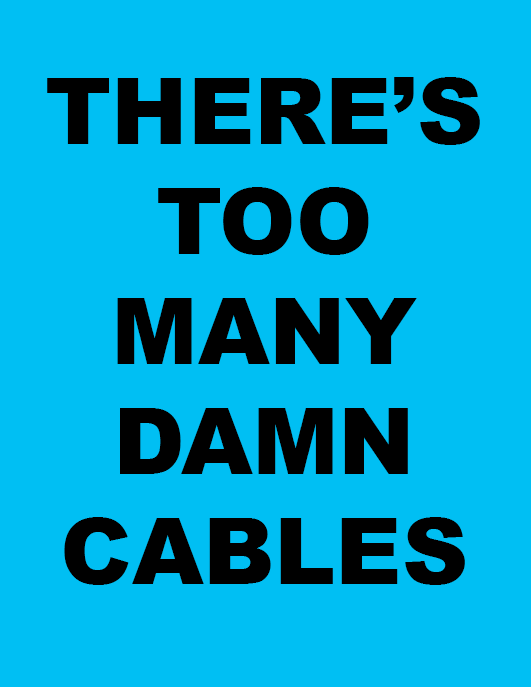
<style>
.page{position:relative;width:531px;height:687px;background:#00bff3}
.page>*{position:absolute;margin:0}
.t1{font:91.7px "Arial-Black";color:#000000}
</style>
<div class="page">
<p class="t1" style="left:47px;top:77px;width:433px;height:508px;text-align:center">THERE’S TOO MANY DAMN CABLES</p>
</div>
